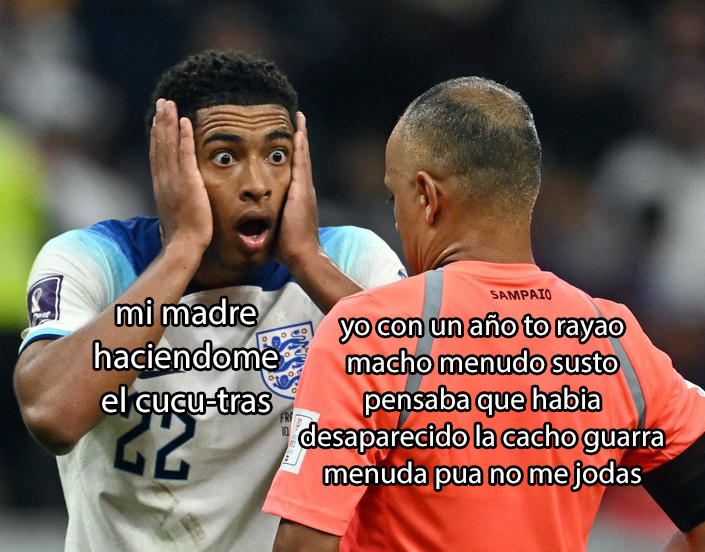
<style>
.page{position:relative;width:705px;height:552px}
.page>*{position:absolute;margin:0}
.t1{font:35.6px "MyriadPro-Regular";color:#ffffff}
.t2{font:30px "MyriadPro-Regular";color:#ffffff}
</style>
<div class="page">
<p class="t1" style="left:95px;top:298px;width:183px;height:115px;text-align:center">mi madre<br>haciendome<br>el cucu-tras</p>
<p class="t2" style="left:301px;top:314px;width:362px;height:176px;text-align:center">yo con un año to rayao<br>macho menudo susto<br>pensaba que habia<br>desaparecido la cacho guarra<br>menuda pua no me jodas</p>
</div>
